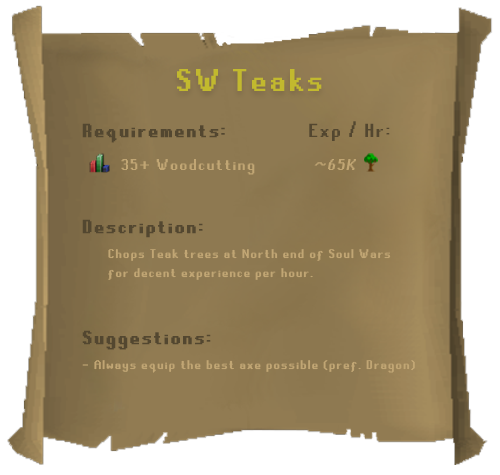
<style>
.page{position:relative;width:500px;height:475px;background:#ffffff}
.page>*{position:absolute;margin:0}
.t1{font:35px "RuneScape-UF";letter-spacing:0.1em;color:#c2b92e}
.t2{font:21px "RuneScape-UF";letter-spacing:0.1em;color:#534730;font-weight:bold}
.t3{font:21px "RuneScape-UF";letter-spacing:0.1em;color:#534730}
.t4{font:17.5px "RuneScape-UF";letter-spacing:0.1em;color:#c1a674}
.t5{font:17.5px "RuneScape-UF";letter-spacing:0.1em;color:#c1a674;font-style:italic}
.t6{font:14px/18.7px "RuneScape-UF";letter-spacing:0.1em;color:#c1a674}
.t7{font:14px "RuneScape-UF";letter-spacing:0.1em;color:#c1a674}
</style>
<div class="page">
<p class="t1" style="left:177px;top:69px;width:145px;height:22px">SW Teaks</p>
<p class="t2" style="left:82px;top:123px;width:143px;height:20px">Requirements:</p>
<p class="t3" style="left:309px;top:121px;width:81px;height:20px">Exp / Hr:</p>
<p class="t4" style="left:121px;top:159px;width:134px;height:16px">35+ Woodcutting</p>
<p class="t5" style="left:314px;top:159px;width:42px;height:11px">~65K</p>
<p class="t2" style="left:82px;top:219px;width:121px;height:19px">Description:</p>
<p class="t6" style="left:108px;top:249px;width:283px;height:31px">Chops Teak trees at North end of Soul Wars<br>for decent experience per hour.</p>
<p class="t2" style="left:82px;top:330px;width:129px;height:20px">Suggestions:</p>
<p class="t7" style="left:82px;top:360px;width:333px;height:13px">- Always equip the best axe possible (pref. Dragon)</p>
</div>
